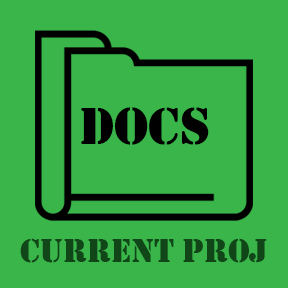
<style>
.page{position:relative;width:288px;height:288px;background:#39b54a}
.page>*{position:absolute;margin:0}
.t1{font:54px "Stencil";color:#000000;text-transform:uppercase}
.t2{font:34px "Stencil";color:#114718;text-transform:uppercase}
</style>
<div class="page">
<p class="t1" style="left:80px;top:107px;width:134px;height:38px">GRFX</p>
<p class="t1" style="left:81px;top:107px;width:128px;height:38px">DOCS</p>
<p class="t2" style="left:20px;top:238px;width:247px;height:25px">Current proj</p>
</div>
